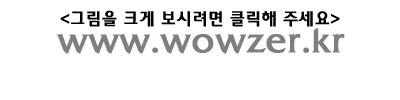
<style>
.page{position:relative;width:400px;height:100px;background:#ffffff}
.page>*{position:absolute;margin:0}
.t1{font:18px "2002L";color:#000000;font-weight:bold}
.t2{font:36px "2002L";color:#7f7f7f;font-weight:bold}
</style>
<div class="page">
<p class="t1" style="left:60px;top:10px;width:280px;height:17px">&lt;그림을 크게 보시려면 클릭해 주세요&gt;</p>
<p class="t2" style="left:56px;top:26px;width:289px;height:28px">www.wowzer.kr</p>
</div>
